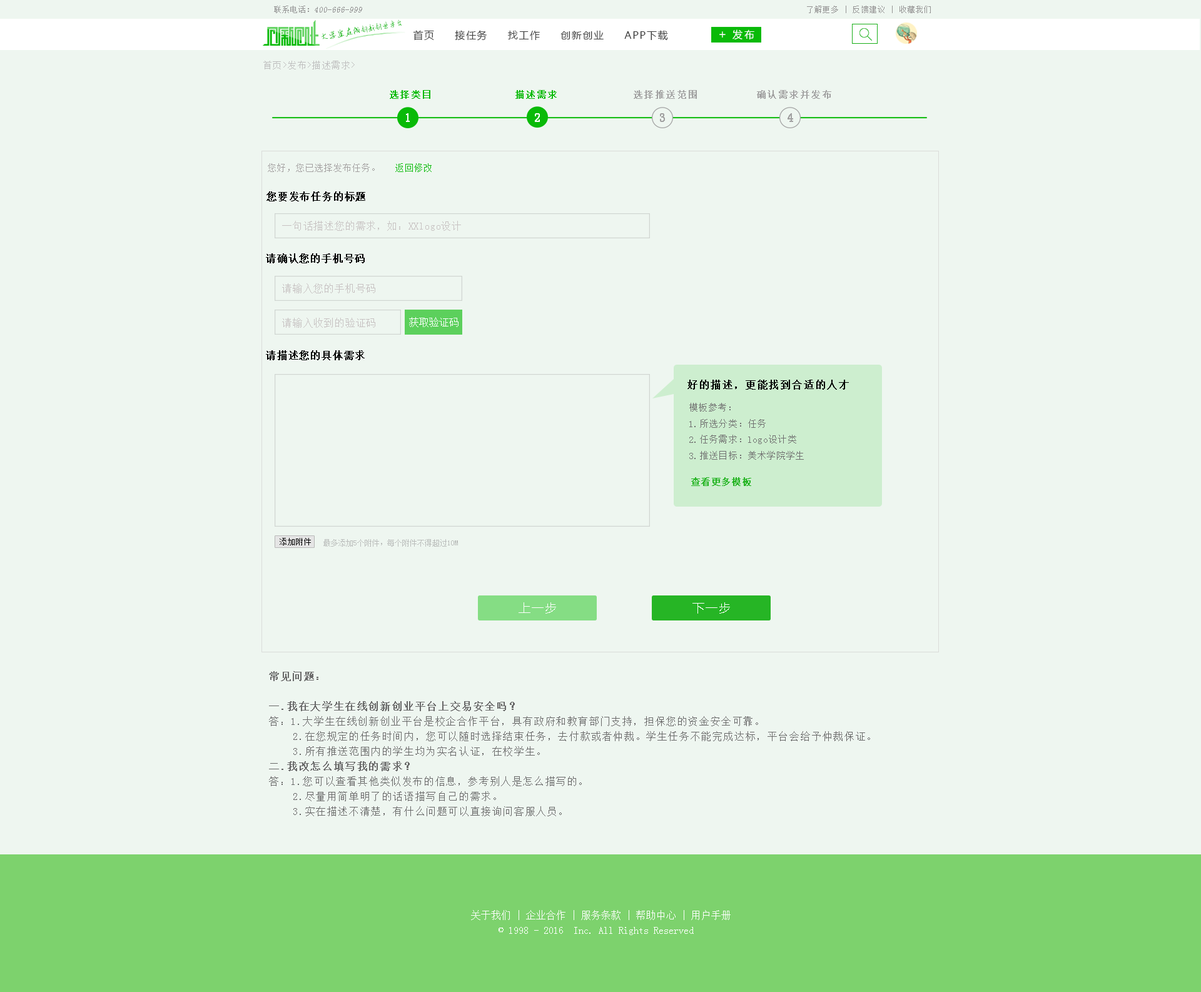
<style>
.page{position:relative;width:1201px;height:992px;background:#eef6f0}
.page>*{position:absolute;margin:0}
.t1{font:8.3px "SimSun";color:#959595;font-style:italic}
.t2{font:8.3px "SimSun";color:#959595}
.t3{font:7.5px "SimSun";letter-spacing:0.1em;color:#959494}
.t4{font:7.7px "AnJingCheng-Xing-2.0";letter-spacing:-0.01em;color:#09ba08}
.t5{font:8.7px "AnJingCheng-Xing-2.0";letter-spacing:-0.01em;color:#09ba08}
.t6{font:10px "MicrosoftYaHei";letter-spacing:0.2em;color:#ffffff}
.t7{font:10px "MicrosoftYaHei";letter-spacing:0.1em;color:#3e3e3e}
.t8{font:11.7px "MicrosoftYaHei";letter-spacing:0.2em;color:#ffffff}
.t9{font:8.8px "SimSun";letter-spacing:0.1em;color:#bebebe}
.t10{font:9.2px "SimSun";letter-spacing:0.1em;color:#09ba08;font-weight:bold}
.t11{font:9.1px "SimSun";letter-spacing:0.1em;color:#a2a2a2;font-weight:bold}
.t12{font:11.6px "SimSun";letter-spacing:0.1em;color:#ffffff;font-weight:bold}
.t13{font:11.6px "SimSun";letter-spacing:0.1em;color:#a2a2a2;font-weight:bold}
.t14{font:11.7px "SimSun";letter-spacing:0.1em;color:#a2a2a2;font-weight:bold}
.t15{font:9.2px "SimSun";color:#a3a0a0}
.t16{font:9.2px "SimSun";color:#09ba08}
.t17{font:10px "SimSun";letter-spacing:0.05em;color:#000000;font-weight:bold}
.t18{font:10px "SimSun";letter-spacing:0.05em;color:#c7c2c2}
.t19{font:10px "SimSun";color:#ffffff}
.t20{font:10px "SimSun";letter-spacing:0.1em;color:#010101;font-weight:bold}
.t21{font:9.2px "SimSun";letter-spacing:0.025em;color:#6f6f6f}
.t22{font:9.2px "SimSun";letter-spacing:0.025em;color:#26b525;font-weight:bold}
.t23{font:8.3px "SimSun";color:#000000}
.t24{font:7.5px "SimSun";color:#a7a7a7}
.t25{font:11.7px "MicrosoftYaHei";letter-spacing:0.1em;color:#ffffff}
.t26{font:10px/15px "SimSun";letter-spacing:0.1em;color:#696969}
.t27{font:10px/15px "SimSun";letter-spacing:0.1em;color:#696969;font-weight:bold}
.t28{font:10px/15px "SimSun";color:#ffffff}
</style>
<div class="page">
<p class="t1" style="left:274px;top:6px;width:88px;height:7px"><span class="t2">联系电话：</span>400-666-999</p>
<p class="t3" style="left:807px;top:6px;width:124px;height:7px">了解更多 | 反馈建议 | 收藏我们</p>
<p class="t4" style="left:322px;top:19px;width:80px;height:20px;rotate:-10deg"><span class="t5">大学生在线</span>创新创业平台</p>
<p class="t6" style="left:733px;top:29px;width:22px;height:10px">发布</p>
<p class="t7" style="left:413px;top:30px;width:255px;height:11px">首页     接任务     找工作     创新创业     APP下载</p>
<p class="t8" style="left:720px;top:31px;width:6px;height:7px">+</p>
<p class="t9" style="left:263px;top:61px;width:92px;height:8px">首页&gt;发布&gt;描述需求&gt;</p>
<p class="t10" style="left:390px;top:90px;width:41px;height:9px">选择类目</p>
<p class="t10" style="left:516px;top:90px;width:41px;height:9px">描述需求</p>
<p class="t11" style="left:634px;top:90px;width:63px;height:9px">选择推送范围</p>
<p class="t11" style="left:757px;top:90px;width:75px;height:9px">确认需求并发布</p>
<p class="t12" style="left:406px;top:113px;width:4px;height:9px">1</p>
<p class="t12" style="left:535px;top:113px;width:5px;height:9px">2</p>
<p class="t13" style="left:660px;top:113px;width:5px;height:9px">3</p>
<p class="t14" style="left:788px;top:113px;width:5px;height:9px">4</p>
<p class="t15" style="left:268px;top:163px;width:164px;height:9px">您好，您已选择发布任务。   <span class="t16">返回修改</span></p>
<p class="t17" style="left:267px;top:191px;width:98px;height:10px">您要发布任务的标题</p>
<p class="t18" style="left:282px;top:221px;width:179px;height:10px">一句话描述您的需求，如：XXlogo设计</p>
<p class="t17" style="left:266px;top:253px;width:99px;height:10px">请确认您的手机号码</p>
<p class="t18" style="left:282px;top:283px;width:93px;height:10px">请输入您的手机号码</p>
<p class="t18" style="left:282px;top:318px;width:93px;height:10px">请输入收到的验证码</p>
<p class="t19" style="left:409px;top:317px;width:50px;height:10px">获取验证码</p>
<p class="t17" style="left:266px;top:350px;width:99px;height:10px">请描述您的具体需求</p>
<p class="t20" style="left:688px;top:380px;width:161px;height:10px">好的描述，更能找到合适的人才</p>
<p class="t21" style="left:690px;top:403px;width:114px;height:57px">模板参考：<br>1.所选分类：任务<br>2.任务需求：logo设计类<br>3.推送目标：美术学院学生</p>
<p class="t22" style="left:691px;top:477px;width:61px;height:9px">查看更多模板</p>
<p class="t23" style="left:280px;top:538px;width:31px;height:8px">添加附件</p>
<p class="t24" style="left:324px;top:539px;width:134px;height:8px;opacity:0.75">最多添加5个附件，每个附件不得超过10M</p>
<p class="t25" style="left:519px;top:603px;width:37px;height:11px">上一步</p>
<p class="t25" style="left:693px;top:603px;width:37px;height:11px">下一步</p>
<p class="t26" style="left:269px;top:671px;width:601px;height:146px"><span class="t27">常见问题：<br><br>一.我在大学生在线创新创业平台上交易安全吗？<br></span>答：1.大学生在线创新创业平台是校企合作平台，具有政府和教育部门支持，担保您的资金安全可靠。<br>    2.在您规定的任务时间内，您可以随时选择结束任务，去付款或者仲裁。学生任务不能完成达标，平台会给予仲裁保证。<br>    3.所有推送范围内的学生均为实名认证，在校学生。<br><span class="t27">二.我改怎么填写我的需求？<br></span>答：1.您可以查看其他类似发布的信息，参考别人是怎么描写的。<br>    2.尽量用简单明了的话语描写自己的需求。<br>    3.实在描述不清楚，有什么问题可以直接询问客服人员。</p>
<p class="t28" style="left:471px;top:910px;width:260px;height:26px;text-align:center">关于我们 | 企业合作 | 服务条款 | 帮助中心 | 用户手册<br>© 1998 - 2016  Inc. All Rights Reserved</p>
</div>
